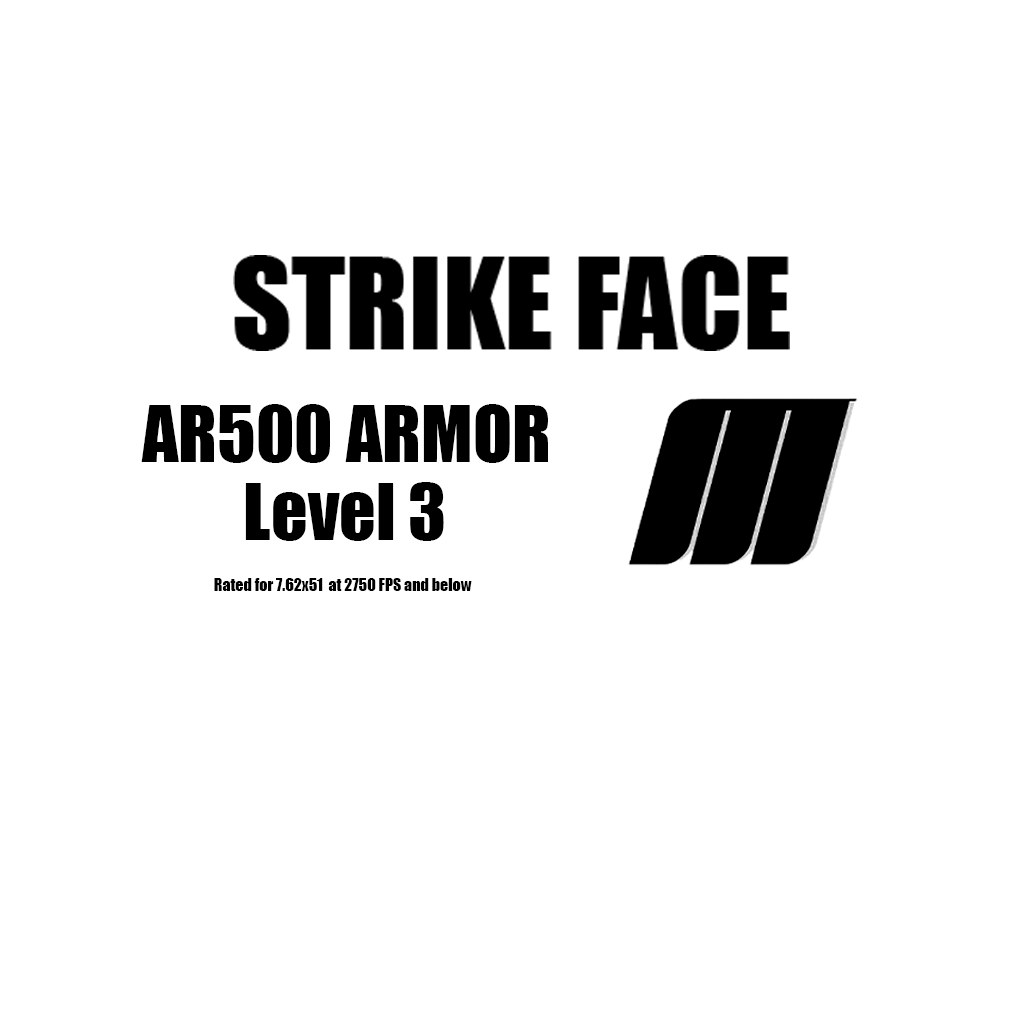
<style>
.page{position:relative;width:1024px;height:1024px;background:#ffffff}
.page>*{position:absolute;margin:0}
.t1{font:72px "Impact";color:#000000}
.t2{font:16px "Impact";color:#000000}
</style>
<div class="page">
<p class="t1" style="left:141px;top:404px;width:407px;height:59px">AR500 ARMOR</p>
<p class="t1" style="left:245px;top:482px;width:199px;height:59px">Level 3</p>
<p class="t2" style="left:214px;top:578px;width:258px;height:13px">Rated for 7.62x51  at 2750 FPS and below</p>
</div>
